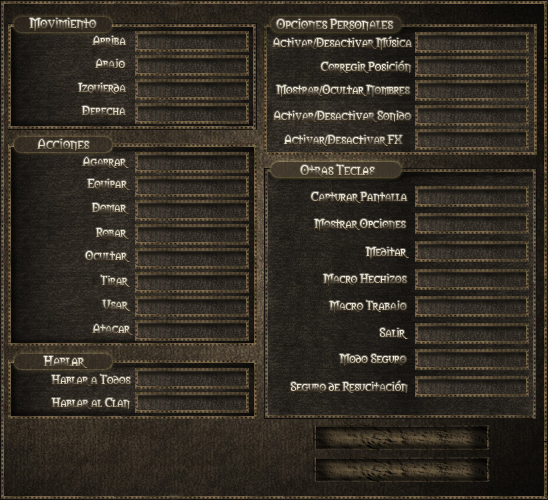
<style>
.page{position:relative;width:548px;height:500px}
.page>*{position:absolute;margin:0}
.t1{font:13.3px "Morpheus";color:#dfdac9}
.t2{font:13.3px "Morpheus"}
.t3{font:12px "Morpheus"}
</style>
<div class="page">
<p class="t1" style="left:29px;top:18px;width:67px;height:13px">Movimiento</p>
<p class="t2" style="left:276px;top:19px;width:117px;height:12px">Opciones Personales</p>
<p class="t3" style="left:92px;top:36px;width:34px;height:11px">Arriba</p>
<p class="t3" style="left:272px;top:37px;width:140px;height:13px">Activar/Desactivar Música</p>
<p class="t3" style="left:95px;top:59px;width:30px;height:9px">Abajo</p>
<p class="t3" style="left:320px;top:61px;width:91px;height:12px">Corregir Posición</p>
<p class="t3" style="left:78px;top:83px;width:48px;height:11px">Izquierda</p>
<p class="t3" style="left:276px;top:85px;width:134px;height:12px">Mostrar/Ocultar Nombres</p>
<p class="t3" style="left:82px;top:106px;width:44px;height:11px">Derecha</p>
<p class="t3" style="left:273px;top:111px;width:138px;height:11px">Activar/Desactivar Sonido</p>
<p class="t3" style="left:283px;top:135px;width:120px;height:11px">Activar/Desactivar FX</p>
<p class="t2" style="left:37px;top:139px;width:53px;height:12px">Acciones</p>
<p class="t3" style="left:82px;top:157px;width:47px;height:11px">Agarrar</p>
<p class="t2" style="left:300px;top:164px;width:75px;height:13px">Otras Teclas</p>
<p class="t3" style="left:87px;top:179px;width:43px;height:11px">Equipar</p>
<p class="t3" style="left:311px;top:192px;width:97px;height:11px">Capturar Pantalla</p>
<p class="t3" style="left:92px;top:203px;width:37px;height:11px">Domar</p>
<p class="t3" style="left:314px;top:219px;width:92px;height:12px">Mostrar Opciones</p>
<p class="t3" style="left:96px;top:228px;width:33px;height:11px">Robar</p>
<p class="t3" style="left:85px;top:251px;width:45px;height:11px">Ocultar</p>
<p class="t3" style="left:366px;top:247px;width:43px;height:12px">Meditar</p>
<p class="t3" style="left:100px;top:275px;width:31px;height:12px">Tirar</p>
<p class="t3" style="left:323px;top:274px;width:84px;height:12px">Macro Hechizos</p>
<p class="t3" style="left:102px;top:300px;width:29px;height:11px">Usar</p>
<p class="t3" style="left:329px;top:300px;width:78px;height:13px">Macro Trabajo</p>
<p class="t3" style="left:92px;top:324px;width:41px;height:11px">Atacar</p>
<p class="t3" style="left:379px;top:328px;width:29px;height:11px">Salir</p>
<p class="t2" style="left:43px;top:356px;width:45px;height:12px">Hablar</p>
<p class="t3" style="left:339px;top:354px;width:68px;height:12px">Modo Seguro</p>
<p class="t3" style="left:51px;top:374px;width:80px;height:12px">Hablar a Todos</p>
<p class="t3" style="left:290px;top:381px;width:118px;height:12px">Seguro de Resucitación</p>
<p class="t3" style="left:52px;top:398px;width:78px;height:11px">Hablar al Clan</p>
</div>
